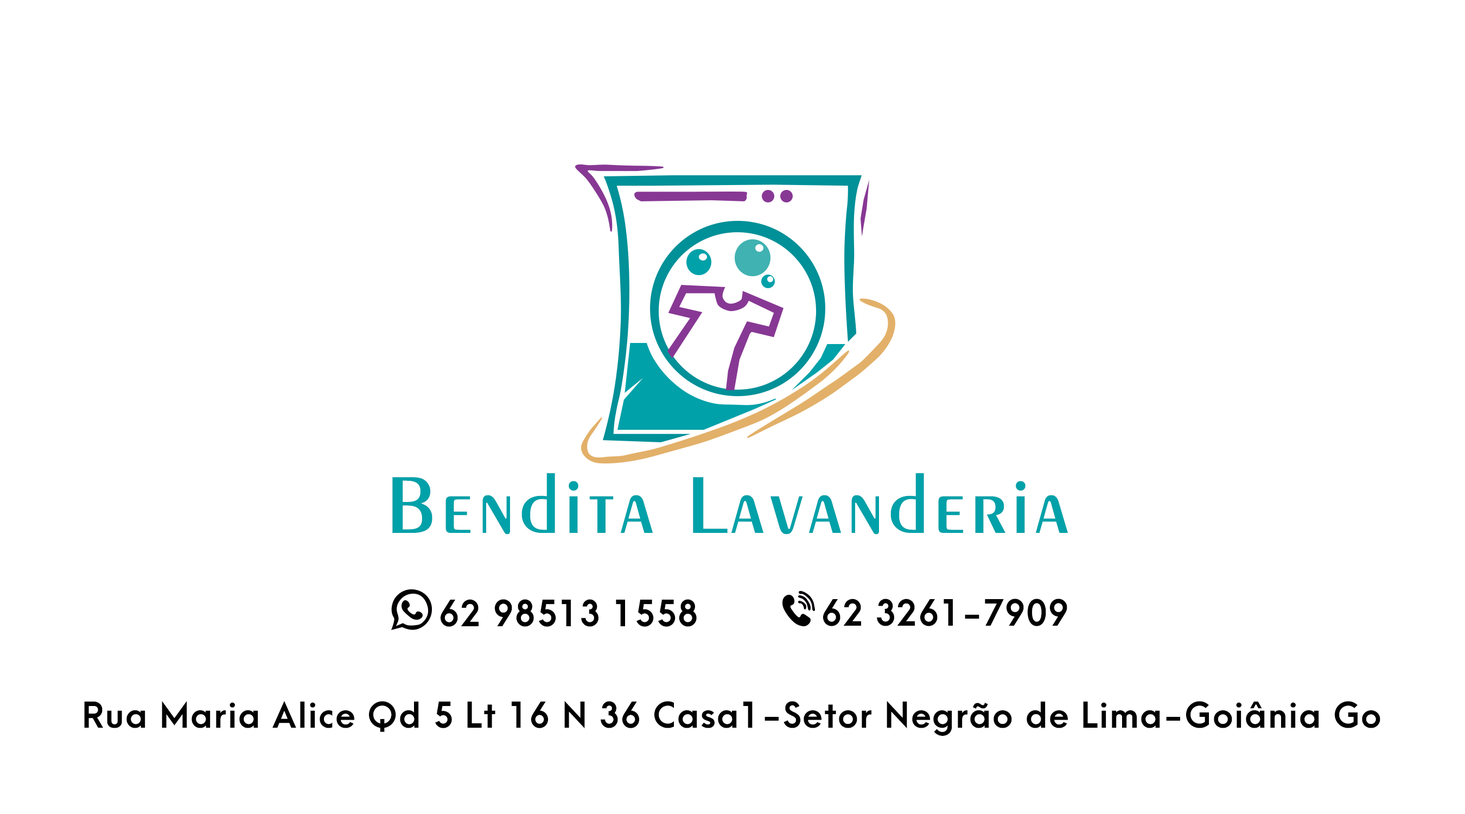
<style>
.page{position:relative;width:1465px;height:814px;background:#ffffff}
.page>*{position:absolute;margin:0}
.t1{font:85.4px "Exotic350BT-DemiBold";letter-spacing:0.04em;color:#00a1a9}
.t2{font:34.5px "ArcaMajora3-Bold";letter-spacing:0.04em;color:#000000}
.t3{font:34px "ArcaMajora3-Bold";letter-spacing:0.04em;color:#000000}
</style>
<div class="page">
<p class="t1" style="left:392px;top:473px;width:676px;height:61px">Bendita Lavanderia</p>
<p class="t2" style="left:440px;top:599px;width:257px;height:28px">62 98513 1558</p>
<p class="t2" style="left:823px;top:599px;width:244px;height:27px">62 3261-7909</p>
<p class="t3" style="left:84px;top:701px;width:1296px;height:35px">Rua Maria Alice Qd 5 Lt 16 N 36 Casa1-Setor Negrão de Lima-Goiânia Go</p>
</div>
